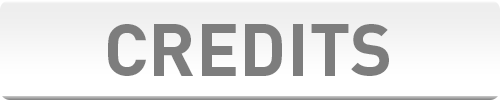
<style>
.page{position:relative;width:500px;height:100px;background:#ffffff}
.page>*{position:absolute;margin:0}
.t1{font:72px "DINPro-Bold";color:#7d7d7d}
</style>
<div class="page">
<p class="t1" style="left:108px;top:24px;width:281px;height:52px">CREDITS</p>
</div>
